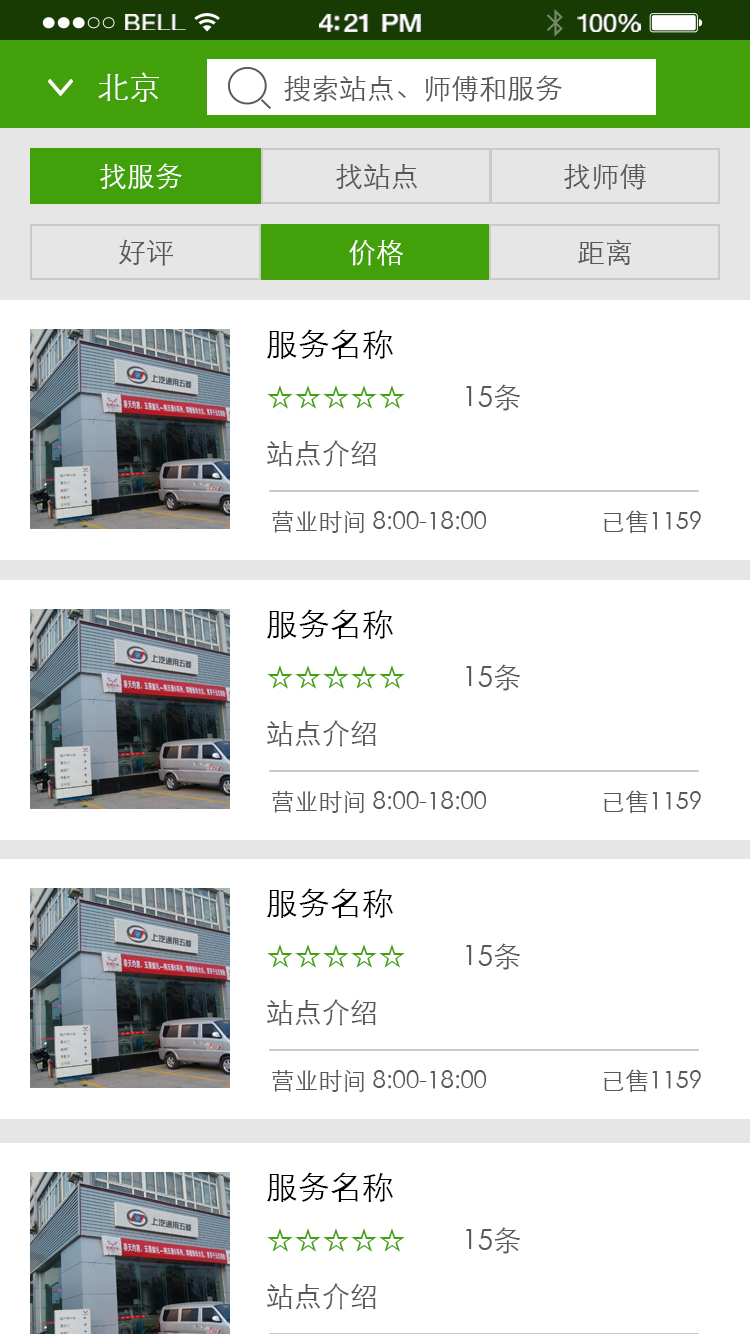
<style>
.page{position:relative;width:750px;height:1334px;background:#ffffff}
.page>*{position:absolute;margin:0}
.t1{font:23.3px "HelveticaNeue";letter-spacing:0.02em;color:#ffffff;scale:1.06 1}
.t2{font:25.3px "HelveticaNeue-Medium";letter-spacing:-0.02em;color:#ffffff;scale:1.06 1}
.t3{font:24.3px "HelveticaNeue";letter-spacing:-0.02em;color:#ffffff;scale:1.06 1}
.t4{font:32px "STXihei";color:#ffffff}
.t5{font:28px "STXihei";color:#595757}
.t6{font:28px "STXihei";color:#ffffff}
.t7{font:28px/56px "STXihei";color:#595757}
.t8{font:32px/56px "STXihei";color:#000000}
.t9{font:28px/56px "STXihei";color:#42a00a}
.t10{font:24px "STXihei";color:#595757}
</style>
<div class="page">
<p class="t1" style="left:125px;top:14px;width:61px;height:16px">BELL</p>
<p class="t2" style="left:319px;top:14px;width:102px;height:18px">4:21 PM</p>
<p class="t3" style="left:577px;top:14px;width:64px;height:18px">100%</p>
<p class="t4" style="left:98px;top:72px;width:61px;height:30px">北京</p>
<p class="t5" style="left:284px;top:75px;width:278px;height:27px">搜索站点、师傅和服务</p>
<p class="t6" style="left:100px;top:163px;width:82px;height:27px">找服务</p>
<p class="t5" style="left:336px;top:164px;width:81px;height:26px">找站点</p>
<p class="t5" style="left:564px;top:164px;width:82px;height:26px">找师傅</p>
<p class="t5" style="left:118px;top:239px;width:55px;height:27px">好评</p>
<p class="t6" style="left:349px;top:239px;width:54px;height:27px">价格</p>
<p class="t5" style="left:578px;top:239px;width:54px;height:27px">距离</p>
<p class="t7" style="left:267px;top:329px;width:253px;height:138px"><span class="t8">服务名称<br></span><span class="t9">☆☆☆☆☆</span>        15条<br>站点介绍</p>
<p class="t10" style="left:272px;top:510px;width:429px;height:23px">营业时间 8:00-18:00                   已售1159</p>
<p class="t7" style="left:267px;top:609px;width:253px;height:138px"><span class="t8">服务名称<br></span><span class="t9">☆☆☆☆☆</span>        15条<br>站点介绍</p>
<p class="t10" style="left:272px;top:790px;width:429px;height:23px">营业时间 8:00-18:00                   已售1159</p>
<p class="t7" style="left:267px;top:888px;width:253px;height:138px"><span class="t8">服务名称<br></span><span class="t9">☆☆☆☆☆</span>        15条<br>站点介绍</p>
<p class="t10" style="left:272px;top:1069px;width:429px;height:23px">营业时间 8:00-18:00                   已售1159</p>
<p class="t7" style="left:267px;top:1172px;width:253px;height:138px"><span class="t8">服务名称<br></span><span class="t9">☆☆☆☆☆</span>        15条<br>站点介绍</p>
</div>
